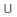
<style>
.page{position:relative;width:17px;height:17px;background:#ffffff}
.page>*{position:absolute;margin:0}
.t1{font:12px "Helvetica";color:#6f6f6f}
</style>
<div class="page">
<p class="t1" style="left:4px;top:4px;width:8px;height:9px">U</p>
</div>
